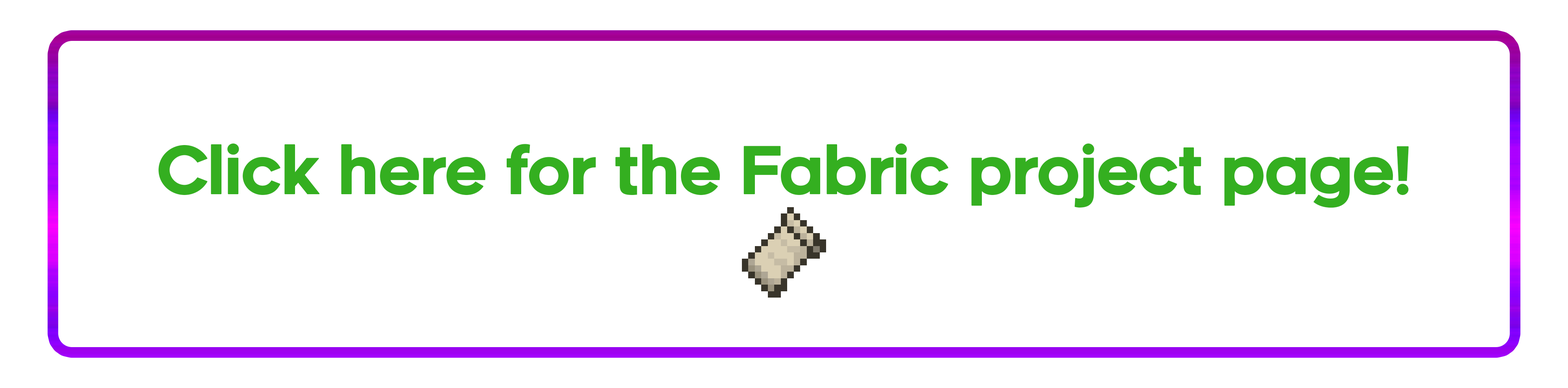
<style>
.page{position:relative;width:1568px;height:388px;background:#ffffff}
.page>*{position:absolute;margin:0}
.t1{font:65px "Renogare-Regular";letter-spacing:-0.05em;color:#34af20;font-weight:bold}
</style>
<div class="page">
<p class="t1" style="left:159px;top:144px;width:1250px;height:64px">Click here for the Fabric project page!</p>
</div>
